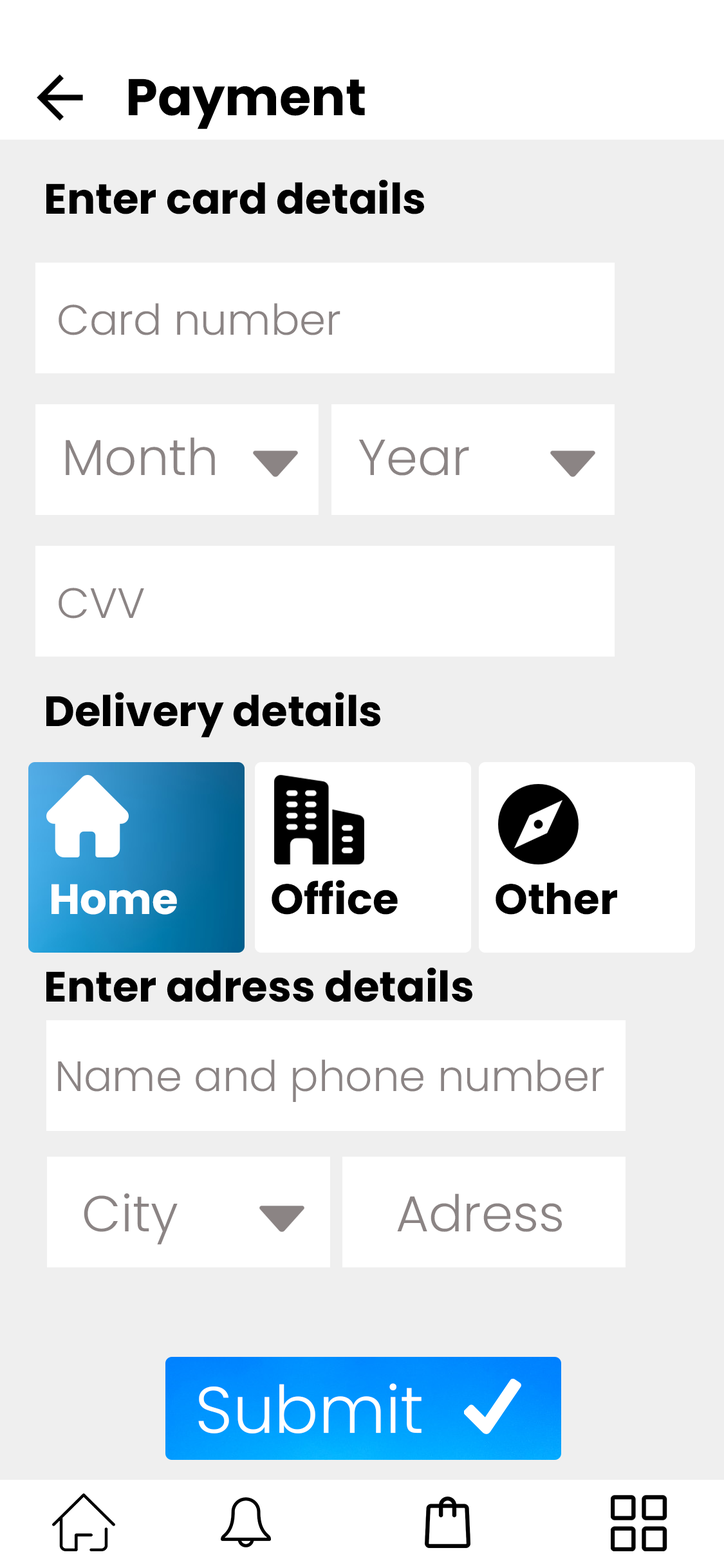
<style>
.page{position:relative;width:724px;height:1568px;background:#ffffff}
.page>*{position:absolute;margin:0}
.t1{font:51.5px "Poppins-Bold";color:#000000}
.t2{font:42.5px "Poppins-Bold";color:#000000}
.t3{font:42.5px "Poppins-Light";color:#8b8484}
.t4{font:50.6px "Poppins-Light";color:#8b8484}
.t5{font:42.5px "Poppins-Bold";color:#ffffff}
.t6{font:65.5px "Poppins-Light";color:#ffffff}
</style>
<div class="page">
<p class="t1" style="left:129px;top:79px;width:236px;height:50px">Payment</p>
<p class="t2" style="left:46px;top:180px;width:378px;height:34px">Enter card details</p>
<p class="t3" style="left:59px;top:303px;width:282px;height:32px">Card number</p>
<p class="t4" style="left:66px;top:437px;width:149px;height:39px">Month</p>
<p class="t4" style="left:359px;top:440px;width:110px;height:36px">Year</p>
<p class="t3" style="left:59px;top:588px;width:85px;height:31px">CVV</p>
<p class="t2" style="left:46px;top:692px;width:334px;height:46px">Delivery details</p>
<p class="t2" style="left:272px;top:880px;width:126px;height:35px">Office</p>
<p class="t5" style="left:51px;top:884px;width:126px;height:31px">Home</p>
<p class="t2" style="left:496px;top:882px;width:121px;height:33px">Other</p>
<p class="t2" style="left:46px;top:967px;width:426px;height:35px">Enter adress details</p>
<p class="t3" style="left:58px;top:1059px;width:546px;height:43px">Name and phone number</p>
<p class="t4" style="left:84px;top:1193px;width:94px;height:52px">City</p>
<p class="t4" style="left:397px;top:1193px;width:165px;height:39px">Adress</p>
<p class="t6" style="left:198px;top:1383px;width:224px;height:50px">Submit</p>
</div>
